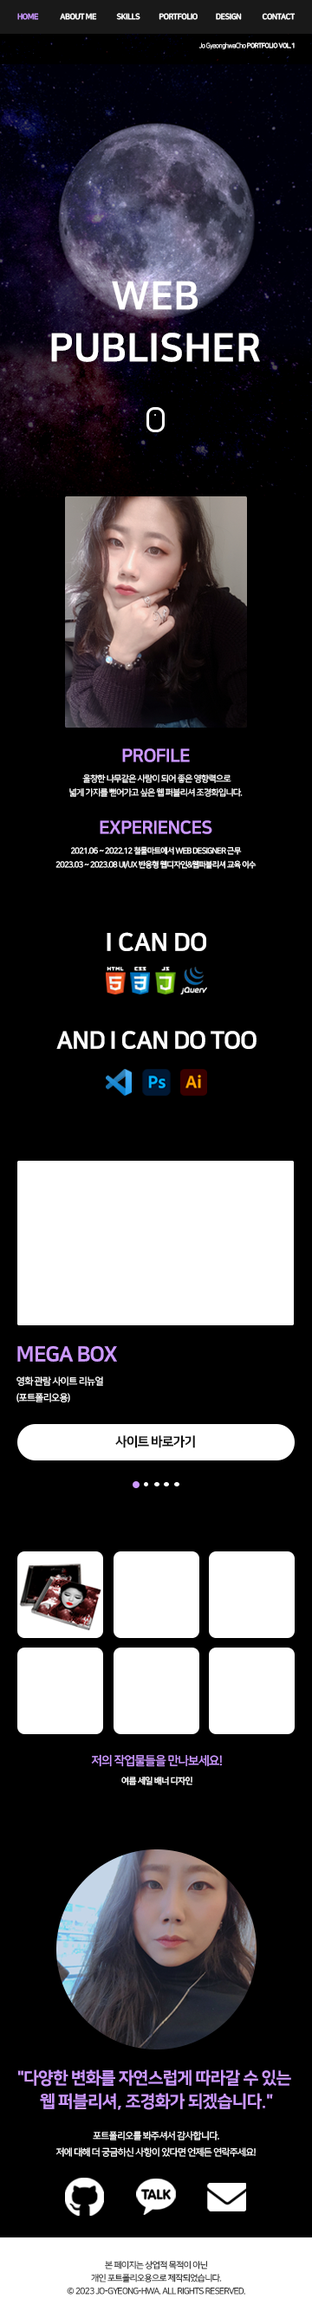
<style>
.page{position:relative;width:312px;height:2318px;background:#000000}
.page>*{position:absolute;margin:0}
.t1{font:7.7px "NanumSquareEB";letter-spacing:-0.06em;color:#cc99ff;text-transform:uppercase}
.t2{font:7.9px "NanumSquareEB";letter-spacing:-0.06em;color:#ffffff;text-transform:uppercase}
.t3{font:7.7px "NanumSquareEB";letter-spacing:-0.06em;color:#ffffff;text-transform:uppercase}
.t4{font:6.4px "NanumSquareL";letter-spacing:-0.06em;color:#ffffff}
.t5{font:6.4px "NanumSquareB";letter-spacing:-0.06em;color:#ffffff}
.t6{font:39.1px/52.1px "NanumSquareEB";color:#ffffff}
.t7{font:18.1px "NanumSquareEB";letter-spacing:-0.04em;color:#cc99ff;text-transform:uppercase}
.t8{font:8.7px/13.6px "NanumSquareR";letter-spacing:-0.06em;color:#ffffff;text-transform:uppercase}
.t9{font:7.9px/13.6px "NanumSquareR";letter-spacing:-0.06em;color:#ffffff;text-transform:uppercase}
.t10{font:24.8px "NanumSquareEB";letter-spacing:-0.02em;color:#ffffff;text-transform:uppercase}
.t11{font:24.3px "NanumSquareEB";letter-spacing:-0.04em;color:#ffffff;text-transform:uppercase}
.t12{font:20.8px "NanumSquareEB";letter-spacing:-0.04em;color:#cc99ff;text-transform:uppercase}
.t13{font:9.5px/16.4px "NanumSquareR";letter-spacing:-0.06em;color:#ffffff;text-transform:uppercase}
.t14{font:13px "NanumSquareEB";letter-spacing:-0.06em;color:#111111;text-transform:uppercase}
.t15{font:12.1px "NanumSquareB";letter-spacing:-0.06em;color:#cc99ff;text-transform:uppercase}
.t16{font:8.7px "NanumSquareB";letter-spacing:-0.06em;color:#ffffff;text-transform:uppercase}
.t17{font:16.8px/23.2px "NanumSquareEB";letter-spacing:-0.04em;color:#cc99ff;text-transform:uppercase}
.t18{font:9.3px/16px "NanumSquareR";letter-spacing:-0.06em;color:#ffffff;text-transform:uppercase}
.t19{font:8.7px/13px "NanumSquareR";letter-spacing:-0.06em;color:#222222;text-transform:uppercase}
</style>
<div class="page">
<p class="t1" style="left:17px;top:13px;width:22px;height:7px">home</p>
<p class="t2" style="left:60px;top:13px;width:37px;height:7px">ABOUT ME</p>
<p class="t2" style="left:116px;top:13px;width:24px;height:7px">SKILLS</p>
<p class="t2" style="left:159px;top:13px;width:38px;height:7px">PORTFOLIO</p>
<p class="t2" style="left:216px;top:13px;width:26px;height:7px">DESIGN</p>
<p class="t3" style="left:262px;top:13px;width:33px;height:7px">CONTACT</p>
<p class="t4" style="left:198px;top:42px;width:97px;height:7px">Jo GyeonghwaCho <span class="t5">PORTFOLIO VOL.1</span></p>
<p class="t6" style="left:51px;top:281px;width:209px;height:81px;text-align:center">WEB<br>PUBLISHER</p>
<p class="t7" style="left:122px;top:748px;width:68px;height:14px">Profile</p>
<p class="t8" style="left:69px;top:774px;width:174px;height:23px;text-align:center">울창한 나무같은 사람이 되어 좋은 영향력으로<br>넓게 가지를 뻗어가고 싶은 웹 퍼블리셔 조경화입니다.</p>
<p class="t7" style="left:100px;top:820px;width:112px;height:14px">Experiences</p>
<p class="t9" style="left:55px;top:846px;width:201px;height:23px;text-align:center">2021.06 ~ 2022.12 철물마트에서 Web Designer 근무<br>2023.03 ~ 2023.08 UI/UX 반응형 웹디자인&amp;웹퍼블리셔 교육 이수</p>
<p class="t10" style="left:107px;top:932px;width:99px;height:19px">I CAN DO</p>
<p class="t11" style="left:56px;top:1031px;width:200px;height:18px">and I can do too</p>
<p class="t12" style="left:17px;top:1346px;width:100px;height:16px">MEGA BOX</p>
<p class="t13" style="left:16px;top:1376px;width:87px;height:26px">영화 관람 사이트 리뉴얼<br>(포트폴리오용)</p>
<p class="t14" style="left:115px;top:1435px;width:80px;height:13px">사이트 바로가기</p>
<p class="t15" style="left:91px;top:1754px;width:131px;height:13px">저의 작업물들을 만나보세요!</p>
<p class="t16" style="left:121px;top:1777px;width:71px;height:8px">여름 세일 배너 디자인</p>
<p class="t17" style="left:17px;top:2069px;width:274px;height:41px;text-align:center">"다양한 변화를 자연스럽게 따라갈 수 있는 <br>웹 퍼블리셔, 조경화가 되겠습니다."</p>
<p class="t18" style="left:56px;top:2131px;width:200px;height:26px;text-align:center">포트폴리오를 봐주셔서 감사합니다.<br>저에 대해 더 궁금하신 사항이 있다면 언제든 연락주세요!</p>
<p class="t19" style="left:67px;top:2261px;width:178px;height:34px;text-align:center">본 페이지는 상업적 목적이 아닌<br>개인 포트폴리오용으로 제작되었습니다.<br>© 2023 Jo-Gyeong-hwa. All Rights Reserved.</p>
</div>
